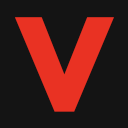
<style>
.page{position:relative;width:128px;height:128px;background:#141414}
.page>*{position:absolute;margin:0}
.t1{font:125px "Futura-Bold";color:#e93223}
</style>
<div class="page">
<p class="t1" style="left:15px;top:17px;width:99px;height:95px">V</p>
</div>
